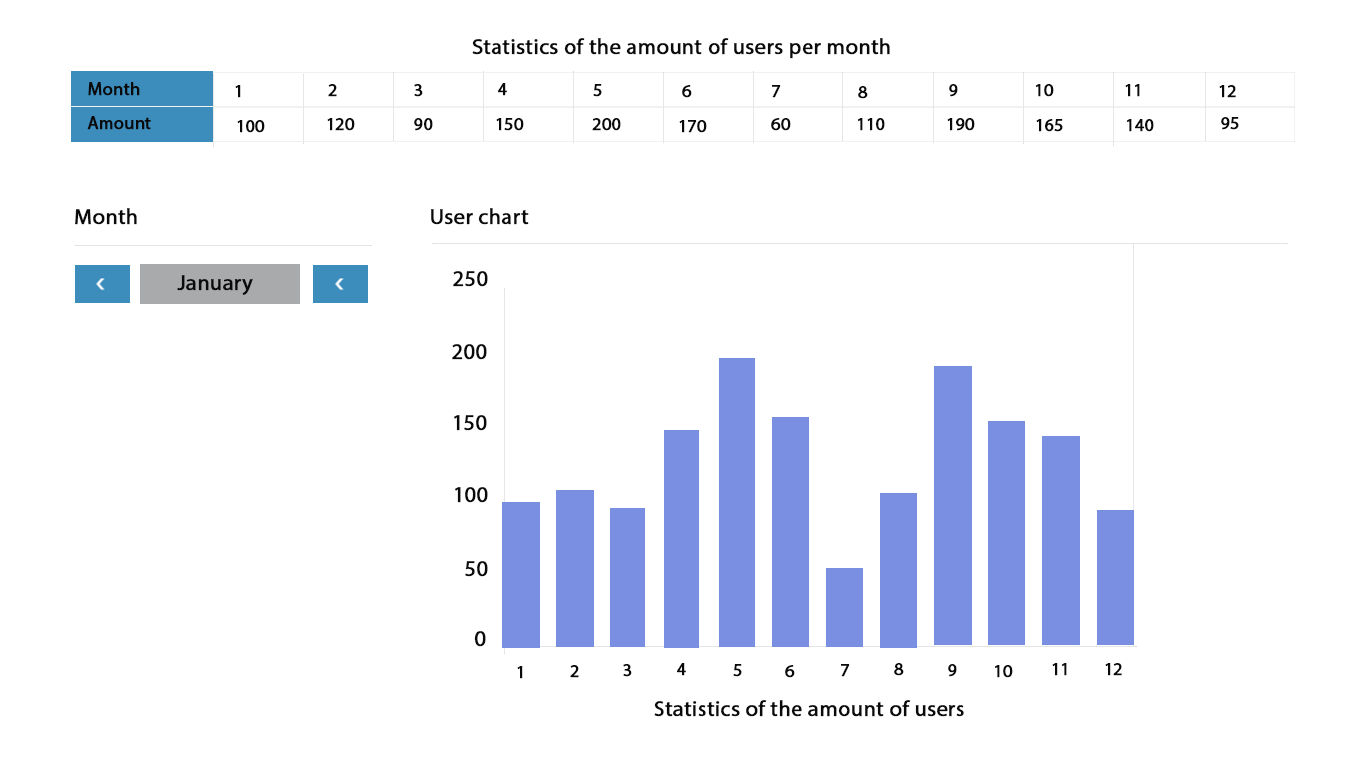
<style>
.page{position:relative;width:1366px;height:768px;background:#ffffff}
.page>*{position:absolute;margin:0}
.t1{font:22px "MyriadPro-Regular";color:#0a0a0a;font-weight:bold}
.t2{font:18px "MyriadPro-Regular";color:#0a0a0a;font-weight:bold}
</style>
<div class="page">
<p class="t1" style="left:472px;top:38px;width:418px;height:21px">Statistics of the amount of users per month</p>
<p class="t2" style="left:88px;top:82px;width:52px;height:14px">Month</p>
<p class="t2" style="left:235px;top:85px;width:6px;height:13px">1</p>
<p class="t2" style="left:328px;top:84px;width:9px;height:13px">2</p>
<p class="t2" style="left:414px;top:84px;width:9px;height:13px">3</p>
<p class="t2" style="left:498px;top:83px;width:9px;height:13px">4</p>
<p class="t2" style="left:593px;top:84px;width:9px;height:13px">5</p>
<p class="t2" style="left:682px;top:85px;width:10px;height:13px">6</p>
<p class="t2" style="left:772px;top:85px;width:9px;height:13px">7</p>
<p class="t2" style="left:858px;top:86px;width:10px;height:13px">8</p>
<p class="t2" style="left:949px;top:84px;width:9px;height:13px">9</p>
<p class="t2" style="left:1035px;top:84px;width:19px;height:13px">10</p>
<p class="t2" style="left:1125px;top:84px;width:15px;height:13px">11</p>
<p class="t2" style="left:1219px;top:85px;width:17px;height:13px">12</p>
<p class="t2" style="left:87px;top:116px;width:64px;height:14px">Amount</p>
<p class="t2" style="left:237px;top:120px;width:28px;height:13px">100</p>
<p class="t2" style="left:327px;top:118px;width:28px;height:13px">120</p>
<p class="t2" style="left:414px;top:118px;width:19px;height:13px">90</p>
<p class="t2" style="left:496px;top:118px;width:28px;height:13px">150</p>
<p class="t2" style="left:592px;top:118px;width:29px;height:13px">200</p>
<p class="t2" style="left:679px;top:120px;width:28px;height:13px">170</p>
<p class="t2" style="left:771px;top:118px;width:20px;height:13px">60</p>
<p class="t2" style="left:857px;top:118px;width:28px;height:13px">110</p>
<p class="t2" style="left:947px;top:118px;width:28px;height:13px">190</p>
<p class="t2" style="left:1036px;top:119px;width:27px;height:13px">165</p>
<p class="t2" style="left:1126px;top:119px;width:28px;height:13px">140</p>
<p class="t2" style="left:1221px;top:117px;width:18px;height:13px">95</p>
<p class="t1" style="left:75px;top:208px;width:62px;height:17px">Month</p>
<p class="t1" style="left:431px;top:208px;width:98px;height:17px">User chart</p>
<p class="t1" style="left:177px;top:275px;width:76px;height:20px">January</p>
<p class="t1" style="left:453px;top:271px;width:35px;height:16px">250</p>
<p class="t1" style="left:452px;top:344px;width:35px;height:16px">200</p>
<p class="t1" style="left:454px;top:415px;width:33px;height:16px">150</p>
<p class="t1" style="left:455px;top:487px;width:33px;height:16px">100</p>
<p class="t1" style="left:465px;top:561px;width:23px;height:16px">50</p>
<p class="t1" style="left:474px;top:631px;width:12px;height:16px">0</p>
<p class="t2" style="left:570px;top:665px;width:9px;height:13px">2</p>
<p class="t2" style="left:623px;top:664px;width:9px;height:13px">3</p>
<p class="t2" style="left:677px;top:663px;width:9px;height:13px">4</p>
<p class="t2" style="left:733px;top:664px;width:9px;height:13px">5</p>
<p class="t2" style="left:785px;top:665px;width:10px;height:13px">6</p>
<p class="t2" style="left:841px;top:664px;width:9px;height:13px">7</p>
<p class="t2" style="left:894px;top:663px;width:10px;height:13px">8</p>
<p class="t2" style="left:948px;top:664px;width:9px;height:13px">9</p>
<p class="t2" style="left:994px;top:665px;width:19px;height:13px">10</p>
<p class="t2" style="left:1052px;top:663px;width:15px;height:13px">11</p>
<p class="t2" style="left:1105px;top:663px;width:17px;height:13px">12</p>
<p class="t2" style="left:517px;top:666px;width:6px;height:13px">1</p>
<p class="t1" style="left:654px;top:700px;width:310px;height:17px">Statistics of the amount of users</p>
</div>
